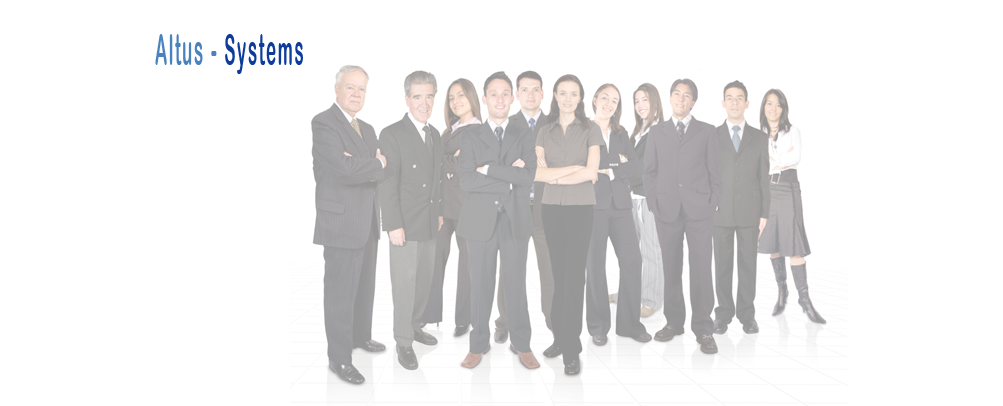
<style>
.page{position:relative;width:1003px;height:406px;background:#ffffff}
.page>*{position:absolute;margin:0}
.t1{font:43.2px "ArialRoundedMTBold";letter-spacing:0.08em;color:#4a82bd;scale:0.4 1}
.t2{font:43.2px "ArialRoundedMTBold";letter-spacing:0.08em;color:#0d3c9b;scale:0.4 1}
</style>
<div class="page">
<p class="t1" style="left:155px;top:34px;width:148px;height:40px">Altus - <span class="t2">Systems</span></p>
</div>
